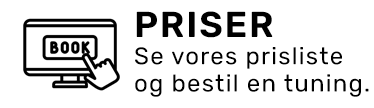
<style>
.page{position:relative;width:374px;height:108px;background:#ffffff}
.page>*{position:absolute;margin:0}
.t1{font:24px/27.2px "Rubik-Regular";letter-spacing:0.05em;color:#000000}
.t2{font:36px/27.2px "Rubik-SemiBold";letter-spacing:0.05em;color:#000000}
</style>
<div class="page">
<p class="t1" style="left:135px;top:11px;width:234px;height:86px"><span class="t2">PRISER<br></span>Se vores prisliste<br>og bestil en tuning.</p>
</div>
